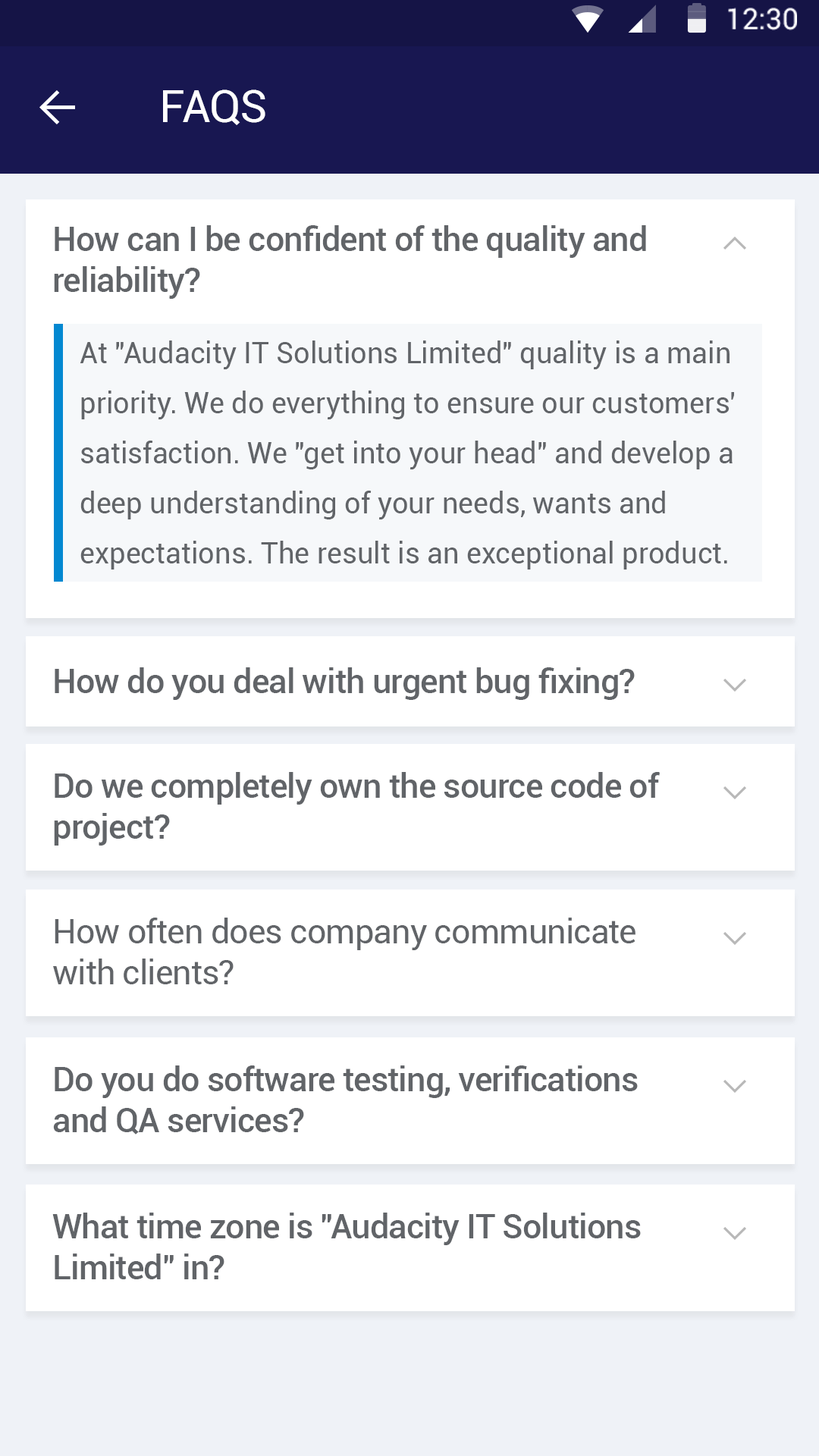
<style>
.page{position:relative;width:819px;height:1456px;background:#ffffff}
.page>*{position:absolute;margin:0}
.t1{font:45.5px "Roboto-Regular";letter-spacing:-0.025em;color:#ffffff}
.t2{font:34.4px "Roboto-Medium";letter-spacing:-0.025em;color:#616468}
.t3{font:28.8px/50px "Roboto-Regular";color:#616468}
.t4{font:34.4px "Roboto-Regular";letter-spacing:-0.025em;color:#616468}
</style>
<div class="page">
<p class="t1" style="left:163px;top:89px;width:102px;height:36px">FAQS</p>
<p class="t2" style="left:54px;top:225px;width:592px;height:74px">How can I be confident of the quality and <br>reliability?</p>
<p class="t3" style="left:80px;top:340px;width:654px;height:230px">At "Audacity IT Solutions Limited" quality is a main priority. We do everything to ensure our customers' satisfaction. We "get into your head" and develop a deep understanding of your needs, wants and expectations. The result is an exceptional product.</p>
<p class="t2" style="left:55px;top:667px;width:580px;height:33px">How do you deal with urgent bug fixing?</p>
<p class="t2" style="left:54px;top:772px;width:606px;height:74px">Do we completely own the source code of <br>project?</p>
<p class="t4" style="left:53px;top:918px;width:582px;height:66px">How often does company communicate <br>with clients?</p>
<p class="t2" style="left:53px;top:1065px;width:585px;height:69px">Do you do software testing, verifications <br>and QA services?</p>
<p class="t2" style="left:52px;top:1213px;width:589px;height:66px">What time zone is "Audacity IT Solutions <br>Limited" in?</p>
</div>
